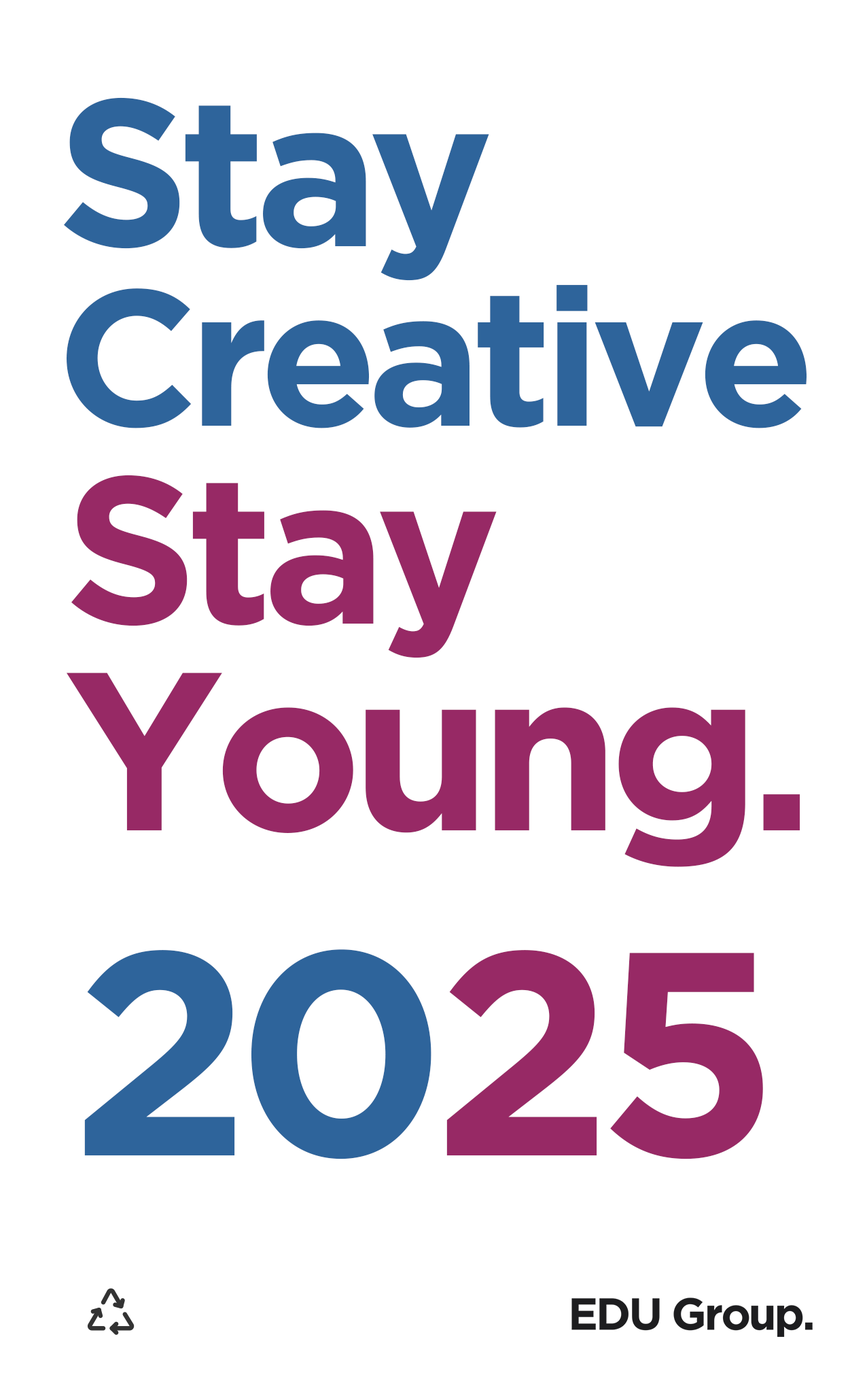
<style>
.page{position:relative;width:867px;height:1375px;background:#ffffff}
.page>*{position:absolute;margin:0}
.t1{font:192.7px/192.7px "Gotham-Bold";letter-spacing:-0.05em;color:#2e649b}
.t2{font:208.8px/192.7px "Gotham-Bold";letter-spacing:-0.05em;color:#2e649b}
.t3{font:224.8px/192.7px "Gotham-Bold";letter-spacing:-0.05em;color:#972965}
.t4{font:208.8px/192.7px "Gotham-Bold";letter-spacing:-0.05em;color:#972965}
.t5{font:289.1px "Gotham-Bold";letter-spacing:-0.05em;color:#2e649b}
.t6{font:289.1px "Gotham-Bold";letter-spacing:-0.05em;color:#972965}
</style>
<div class="page">
<p class="t1" style="left:64px;top:97px;width:744px;height:331px"><span class="t2">Stay<br></span>Creative</p>
<p class="t3" style="left:66px;top:475px;width:735px;height:392px"><span class="t4">Stay<br></span>Young.</p>
<p class="t5" style="left:84px;top:949px;width:679px;height:210px">20<span class="t6">25</span></p>
</div>
